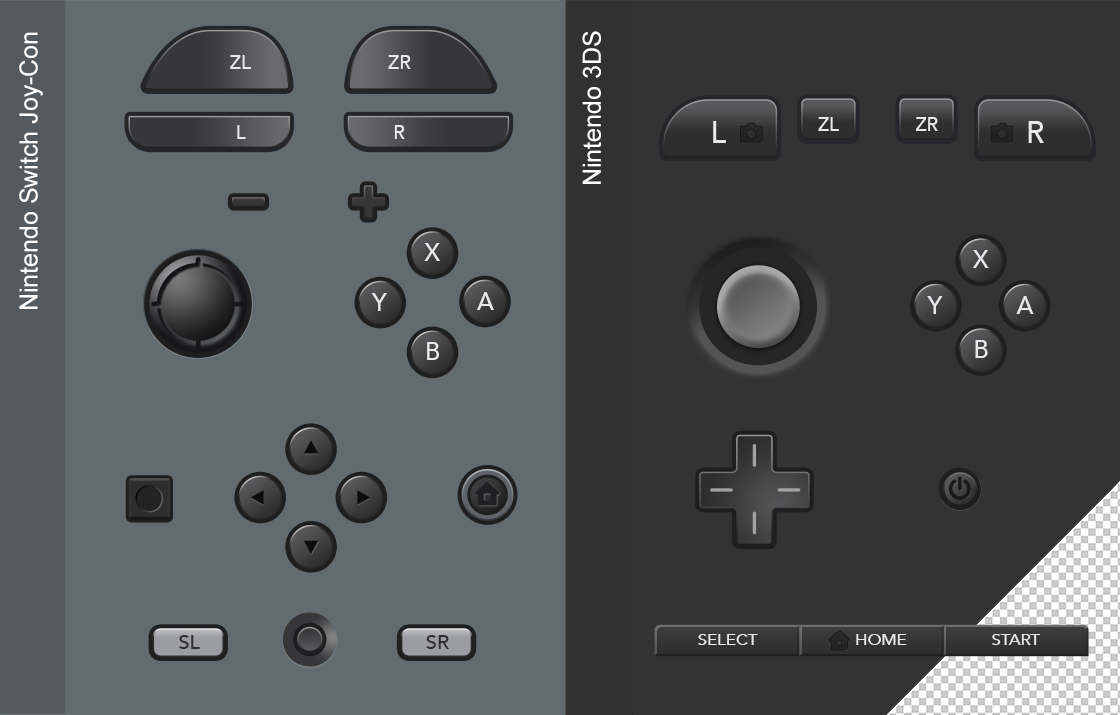
<style>
.page{position:relative;width:1120px;height:715px;background:#626b70}
.page>*{position:absolute;margin:0}
.t1{font:25px "ArialMT";color:#ffffff}
.t2{font:19.1px "Avenir-Medium";color:#e7e9eb}
.t3{font:29.7px "Avenir-Medium";color:#e7e9eb}
.t4{font:18.5px "Avenir-Medium";color:#e7e9eb}
.t5{font:24.2px "Avenir-Medium";color:#e7e9eb}
.t6{font:19.8px "Avenir-Medium";color:#2e2e2f}
.t7{font:15px "Avenir-Medium";color:#e7e9eb;scale:1.11 1}
</style>
<div class="page">
<p class="t1" style="left:19px;top:32px;width:24px;height:277px;rotate:-90deg">Nintendo Switch Joy-Con</p>
<p class="t1" style="left:582px;top:31px;width:19px;height:153px;rotate:-90deg">Nintendo 3DS</p>
<p class="t2" style="left:230px;top:55px;width:21px;height:14px">ZL</p>
<p class="t2" style="left:388px;top:55px;width:23px;height:14px">ZR</p>
<p class="t2" style="left:237px;top:125px;width:9px;height:14px">L</p>
<p class="t2" style="left:394px;top:125px;width:11px;height:14px">R</p>
<p class="t3" style="left:713px;top:121px;width:13px;height:22px">L</p>
<p class="t4" style="left:818px;top:117px;width:21px;height:14px">ZL</p>
<p class="t4" style="left:916px;top:117px;width:22px;height:14px">ZR</p>
<p class="t3" style="left:1028px;top:121px;width:16px;height:22px">R</p>
<p class="t5" style="left:424px;top:243px;width:17px;height:18px">X</p>
<p class="t5" style="left:973px;top:250px;width:16px;height:18px">X</p>
<p class="t5" style="left:371px;top:293px;width:16px;height:18px">Y</p>
<p class="t5" style="left:477px;top:292px;width:17px;height:18px">A</p>
<p class="t5" style="left:927px;top:296px;width:16px;height:18px">Y</p>
<p class="t5" style="left:1016px;top:296px;width:18px;height:18px">A</p>
<p class="t5" style="left:427px;top:342px;width:12px;height:18px">B</p>
<p class="t5" style="left:975px;top:340px;width:13px;height:18px">B</p>
<p class="t6" style="left:179px;top:635px;width:21px;height:14px">SL</p>
<p class="t6" style="left:426px;top:635px;width:23px;height:14px">SR</p>
<p class="t7" style="left:698px;top:634px;width:60px;height:11px">SELECT</p>
<p class="t7" style="left:856px;top:634px;width:51px;height:11px">HOME</p>
<p class="t7" style="left:992px;top:634px;width:48px;height:11px">START</p>
</div>
